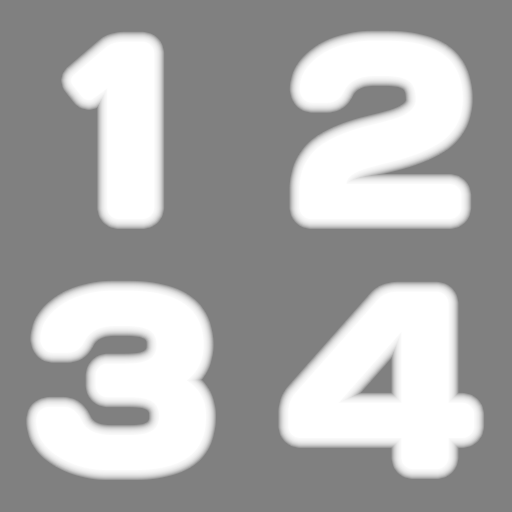
<style>
.page{position:relative;width:512px;height:512px;background:#808080}
.page>*{position:absolute;margin:0}
.t1{font:252.9px "DaysOne-Regular";color:#ffffff}
</style>
<div class="page">
<p class="t1" style="left:71px;top:41px;width:84px;height:178px">1</p>
<p class="t1" style="left:299px;top:40px;width:164px;height:179px">2</p>
<p class="t1" style="left:36px;top:290px;width:170px;height:180px">3</p>
<p class="t1" style="left:288px;top:291px;width:187px;height:178px">4</p>
</div>
